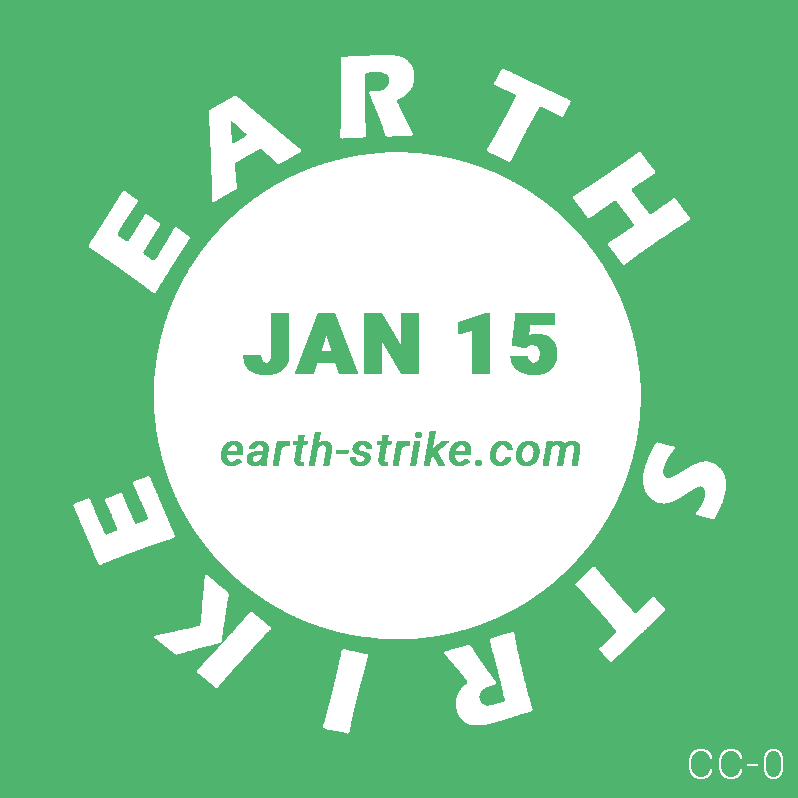
<style>
.page{position:relative;width:798px;height:798px;background:#4fb56e}
.page>*{position:absolute;margin:0}
.t1{font:84px "Roboto-Black";letter-spacing:0.02em;color:#4fb56e;font-weight:bold;scale:1.05 1}
.t2{font:44px "Roboto-Italic";letter-spacing:0.02em;color:#4fb56e;font-weight:bold;scale:1.05 1}
.t3{font:41px "Roboto-Thin";letter-spacing:0.02em;color:#ffffff;font-weight:bold;scale:1.05 1}
</style>
<div class="page">
<p class="t1" style="left:243px;top:313px;width:314px;height:62px">JAN 15</p>
<p class="t2" style="left:221px;top:431px;width:359px;height:35px">earth-strike.com</p>
<p class="t3" style="left:689px;top:749px;width:94px;height:30px">CC-0</p>
</div>
